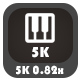
<style>
.page{position:relative;width:80px;height:80px;background:#464646}
.page>*{position:absolute;margin:0}
.t1{font:15px "Bauhaus93";color:#ffffff}
.t2{font:12px "Bauhaus93";color:#ffffff}
</style>
<div class="page">
<p class="t1" style="left:32px;top:47px;width:17px;height:11px">5K</p>
<p class="t2" style="left:16px;top:65px;width:48px;height:10px">5K 0.82x</p>
</div>
